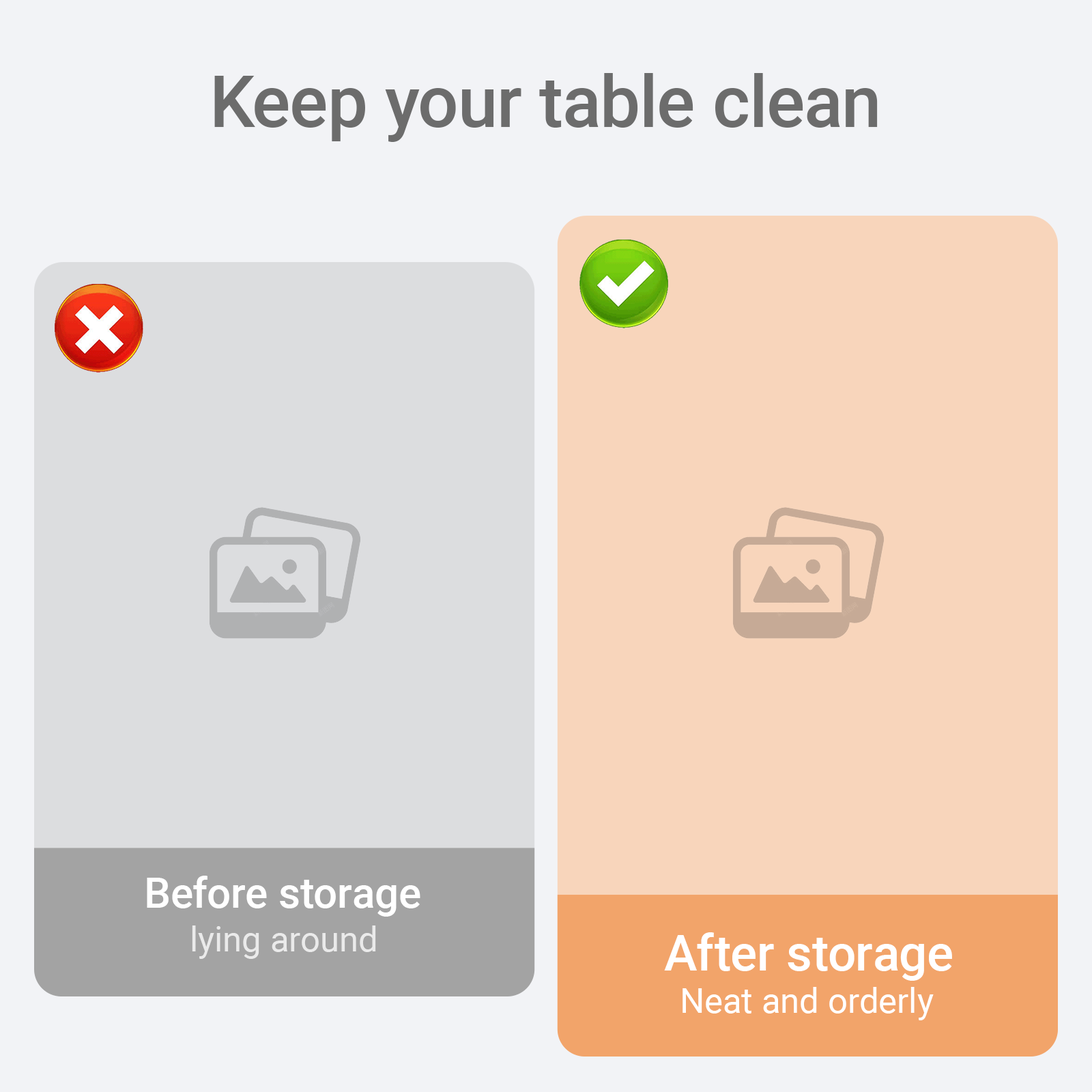
<style>
.page{position:relative;width:1092px;height:1092px;background:#f2f3f6}
.page>*{position:absolute;margin:0}
.t1{font:71.3px "Roboto-Medium";color:#6c6c6c}
.t2{font:42.2px "Roboto-Medium";color:#ffffff}
.t3{font:34.9px "Roboto-Regular";color:#ffffff}
.t4{font:49.5px "Roboto-Medium";color:#ffffff}
</style>
<div class="page">
<p class="t1" style="left:214px;top:73px;width:664px;height:69px">Keep your table clean</p>
<p class="t2" style="left:147px;top:876px;width:273px;height:41px">Before storage</p>
<p class="t3" style="left:192px;top:925px;width:184px;height:34px;opacity:0.75">lying around</p>
<p class="t4" style="left:664px;top:932px;width:288px;height:49px">After storage</p>
<p class="t3" style="left:682px;top:987px;width:252px;height:33px">Neat and orderly</p>
</div>
